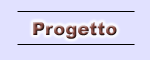
<style>
.page{position:relative;width:150px;height:60px;background:#e1e1ff}
.page>*{position:absolute;margin:0}
.t1{font:18px "Arial-Black"}
</style>
<div class="page">
<p class="t1" style="left:33px;top:22px;width:84px;height:17px">Progetto</p>
</div>
